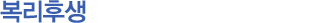
<style>
.page{position:relative;width:310px;height:23px;background:#ffffff}
.page>*{position:absolute;margin:0}
.t1{font:25px "YDIYGO340";letter-spacing:-0.05em;color:#395eae}
</style>
<div class="page">
<p class="t1" style="left:0px;top:0px;width:86px;height:23px">복리후생</p>
</div>
